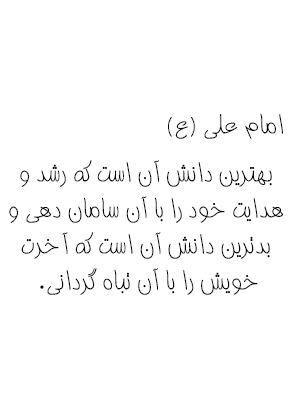
<style>
.page{position:relative;width:290px;height:420px;background:#ffffff}
.page>*{position:absolute;margin:0}
.t1{font:30px "BZiba";color:#000000}
</style>
<div class="page">
<p class="t1" style="left:168px;top:113px;width:115px;height:26px">(امام علی (ع</p>
<p class="t1" style="left:9px;top:160px;width:274px;height:135px;text-align:center">بهترین دانش آن است که رشد و <br>هدایت خود را با آن سامان دهی و <br>بدترین دانش آن است که آخرت <br>.خویش را با آن تباه گردانی</p>
</div>
